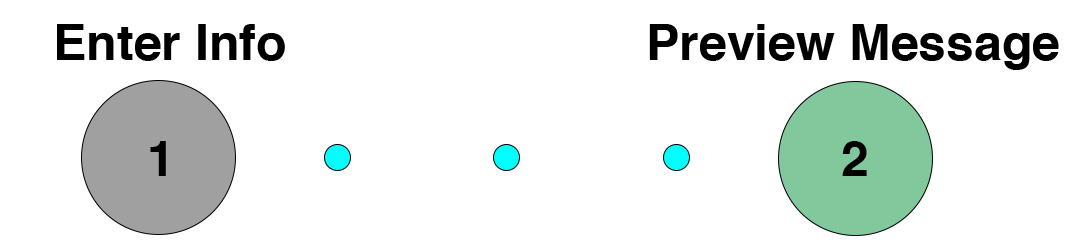
<style>
.page{position:relative;width:1080px;height:250px;background:#ffffff}
.page>*{position:absolute;margin:0}
.t1{font:50px "Helvetica-Bold";color:#000000}
.t2{font:12px "Helvetica-Bold";color:#000000}
</style>
<div class="page">
<p class="t1" style="left:57px;top:24px;width:228px;height:37px">Enter Info</p>
<p class="t1" style="left:649px;top:24px;width:410px;height:46px">Preview Message</p>
<p class="t2" style="left:150px;top:141px;width:16px;height:35px">1</p>
<p class="t2" style="left:842px;top:141px;width:25px;height:35px">2</p>
</div>
